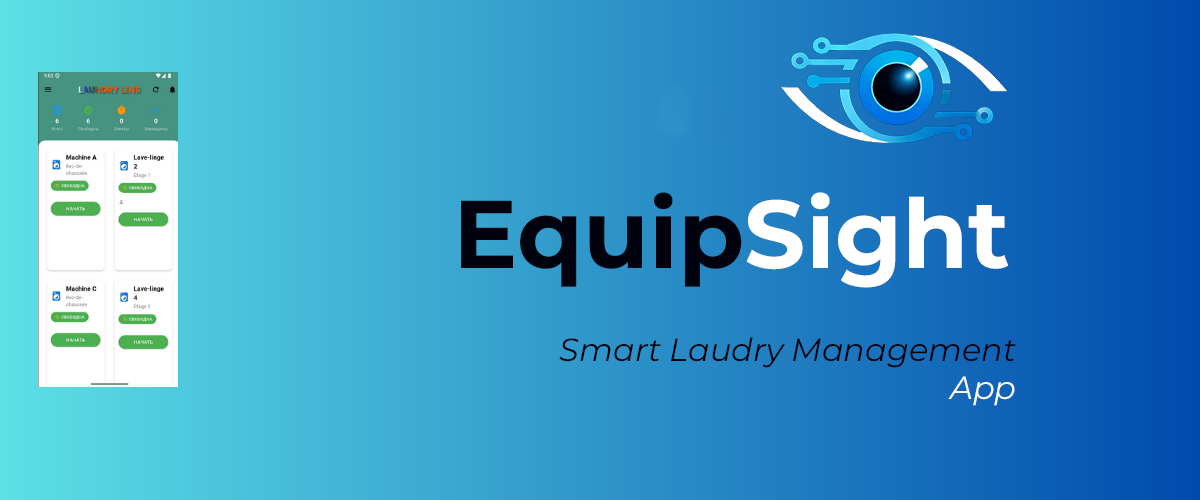
<style>
.page{position:relative;width:1200px;height:500px}
.page>*{position:absolute;margin:0}
.t1{font:96px "Montserrat-Bold";color:#00020e}
.t2{font:96px "Montserrat-Bold";color:#ffffff}
.t3{font:32px "Montserrat-Italic";color:#00020e}
.t4{font:32px "Montserrat-Italic";color:#ffffff}
</style>
<div class="page">
<p class="t1" style="left:461px;top:192px;width:548px;height:96px">Equip<span class="t2">Sight</span></p>
<p class="t3" style="left:559px;top:337px;width:457px;height:69px;text-align:right">Smart Laudry Management<br><span class="t4">App</span></p>
</div>
